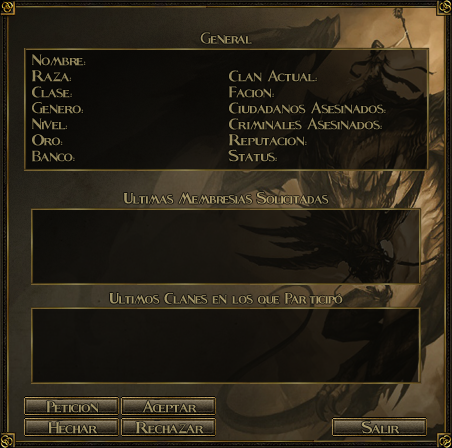
<style>
.page{position:relative;width:452px;height:448px}
.page>*{position:absolute;margin:0}
.t1{font:28.9px "Fleet-Street";color:#9d9063;scale:0.94 1}
.t2{font:29.3px "Fleet-Street";color:#93875d}
.t3{font:29.3px "Fleet-Street";color:#93875c}
.t4{font:29.3px "Fleet-Street";color:#94895d}
.t5{font:29.3px "Fleet-Street";color:#94895e}
.t6{font:29.3px "Fleet-Street";color:#95895e}
.t7{font:29.3px "Fleet-Street";color:#968a5e}
.t8{font:29.3px "Fleet-Street";color:#93885d}
.t9{font:29.3px "Fleet-Street";color:#988c5f}
.t10{font:28.9px "Fleet-Street";color:#a89a6a;scale:0.94 1}
.t11{font:28.9px "Fleet-Street";color:#a49768;scale:0.94 1}
.t12{font:30px "Fleet-Street";color:#a19365}
.t13{font:30px "Fleet-Street";color:#a19466}
.t14{font:30px "Fleet-Street";color:#a29466}
</style>
<div class="page">
<p class="t1" style="left:200px;top:32px;width:52px;height:12px">General</p>
<p class="t2" style="left:32px;top:54px;width:54px;height:12px">Nombre:</p>
<p class="t3" style="left:32px;top:70px;width:40px;height:12px">Raza:</p>
<p class="t4" style="left:229px;top:69px;width:88px;height:13px">Clan Actual:</p>
<p class="t3" style="left:32px;top:86px;width:40px;height:12px">Clase:</p>
<p class="t5" style="left:229px;top:86px;width:45px;height:12px">Facion:</p>
<p class="t3" style="left:32px;top:101px;width:52px;height:13px">Genero:</p>
<p class="t6" style="left:229px;top:101px;width:157px;height:13px">Ciudadanos Asesinados:</p>
<p class="t3" style="left:32px;top:118px;width:36px;height:12px">Nivel:</p>
<p class="t7" style="left:229px;top:117px;width:153px;height:13px">Criminales Asesinados:</p>
<p class="t2" style="left:32px;top:134px;width:31px;height:12px">Oro:</p>
<p class="t7" style="left:229px;top:134px;width:78px;height:12px">Reputacion:</p>
<p class="t8" style="left:32px;top:150px;width:43px;height:12px">Banco:</p>
<p class="t9" style="left:228px;top:149px;width:49px;height:13px">Status:</p>
<p class="t10" style="left:123px;top:192px;width:206px;height:12px">Ultimas Membresias Solicitadas</p>
<p class="t11" style="left:109px;top:292px;width:234px;height:12px">Ultimos Clanes en los que Participó</p>
<p class="t12" style="left:46px;top:401px;width:53px;height:12px">Peticion</p>
<p class="t13" style="left:142px;top:400px;width:55px;height:13px">Aceptar</p>
<p class="t13" style="left:48px;top:422px;width:50px;height:12px">Hechar</p>
<p class="t13" style="left:136px;top:422px;width:68px;height:12px">Rechazar</p>
<p class="t14" style="left:361px;top:421px;width:39px;height:13px">Salir</p>
</div>
